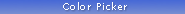
<style>
.page{position:relative;width:185px;height:14px}
.page>*{position:absolute;margin:0}
.t1{font:9.8px "LucidaSansUnicode";letter-spacing:0.05em;color:#ffffff}
</style>
<div class="page">
<p class="t1" style="left:63px;top:2px;width:64px;height:8px">Color Picker</p>
</div>
